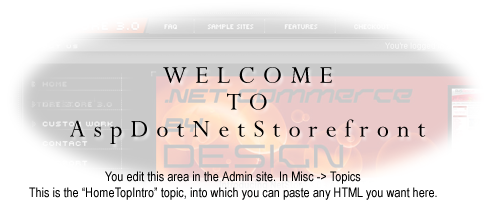
<style>
.page{position:relative;width:500px;height:201px;background:#ffffff}
.page>*{position:absolute;margin:0}
.t1{font:26.9px/26.9px "Perpetua";letter-spacing:0.3em;color:#000000}
.t2{font:13.3px "ArialNarrow";color:#000000}
</style>
<div class="page">
<p class="t1" style="left:70px;top:67px;width:356px;height:77px;text-align:center">WELCOME<br>TO<br>AspDotNetStorefront</p>
<p class="t2" style="left:29px;top:171px;width:408px;height:29px;text-align:center">You edit this area in the Admin site. In Misc -&gt; Topics<br>This is the “HomeTopIntro” topic, into which you can paste any HTML you want here.</p>
</div>
